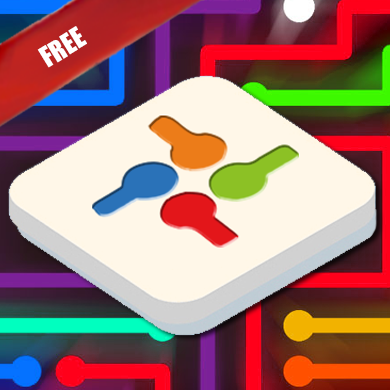
<style>
.page{position:relative;width:390px;height:390px;background:#fff7e8}
.page>*{position:absolute;margin:0}
.t1{font:26.3px "Impact";color:#ffffff}
</style>
<div class="page">
<p class="t1" style="left:37px;top:26px;width:50px;height:42px;rotate:-31deg">FREE</p>
</div>
